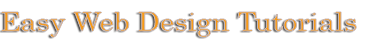
<style>
.page{position:relative;width:370px;height:43px;background:#ffffff}
.page>*{position:absolute;margin:0}
.t1{font:26px "Century";scale:1.1 1}
</style>
<div class="page">
<p class="t1" style="left:1px;top:12px;width:356px;height:25px">Easy Web Design Tutorials</p>
</div>
